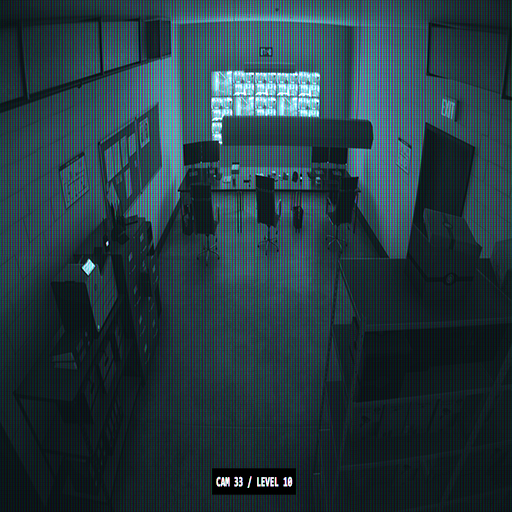
<style>
.page{position:relative;width:512px;height:512px}
.page>*{position:absolute;margin:0}
.t1{font:13.7px "Consolas-Bold";color:#ffffff;font-weight:bold;scale:0.56 1}
</style>
<div class="page">
<p class="t1" style="left:216px;top:476px;width:77px;height:12px">CAM 33 / LEVEL 10</p>
</div>
